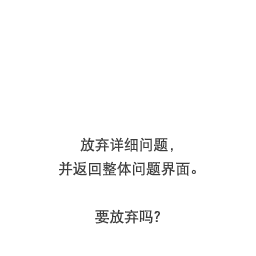
<style>
.page{position:relative;width:256px;height:256px;background:#ffffff}
.page>*{position:absolute;margin:0}
.t1{font:14.7px/24px "DFPHeiW5-GB";color:#3c3c3c}
</style>
<div class="page">
<p class="t1" style="left:59px;top:137px;width:137px;height:87px;text-align:center">放弃详细问题，<br>并返回整体问题界面。<br><br>要放弃吗？</p>
</div>
